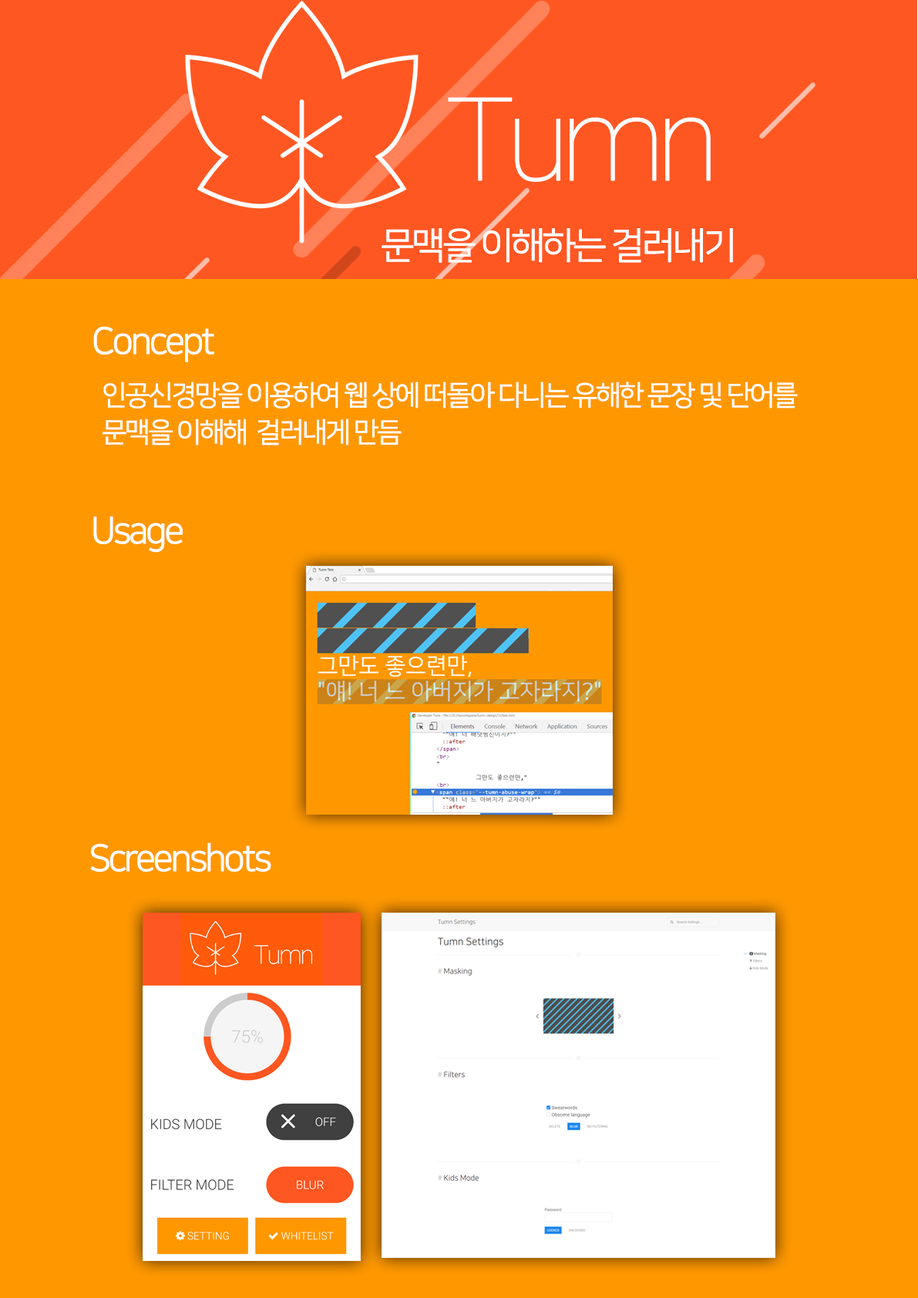
<style>
.page{position:relative;width:918px;height:1298px;background:#ff9800}
.page>*{position:absolute;margin:0}
.t1{font:115.7px "Roboto-Thin";letter-spacing:-0.1em;color:#ffffff;font-weight:bold}
.t2{font:37px "NanumSquareR";letter-spacing:-0.1em;color:#ffffff;font-weight:bold}
.t3{font:27.8px/37px "NanumSquareR";letter-spacing:-0.1em;color:#ffffff;font-weight:bold}
</style>
<div class="page">
<p class="t1" style="left:448px;top:97px;width:263px;height:85px">Tumn</p>
<p class="t2" style="left:382px;top:228px;width:351px;height:35px">문맥을 이해하는 걸러내기</p>
<p class="t2" style="left:93px;top:326px;width:121px;height:36px">Concept</p>
<p class="t3" style="left:103px;top:382px;width:695px;height:64px">인공신경망을 이용하여 웹 상에 떠돌아 다니는 유해한 문장 및 단어를<br>문맥을 이해해  걸러내게 만듬</p>
<p class="t2" style="left:93px;top:517px;width:90px;height:36px">Usage</p>
<p class="t2" style="left:90px;top:843px;width:181px;height:29px">Screenshots</p>
</div>
